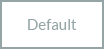
<style>
.page{position:relative;width:104px;height:49px;background:#ffffff}
.page>*{position:absolute;margin:0}
.t1{font:15px "Lato-Regular";color:#95a5a6}
</style>
<div class="page">
<p class="t1" style="left:28px;top:19px;width:49px;height:11px">Default</p>
</div>
